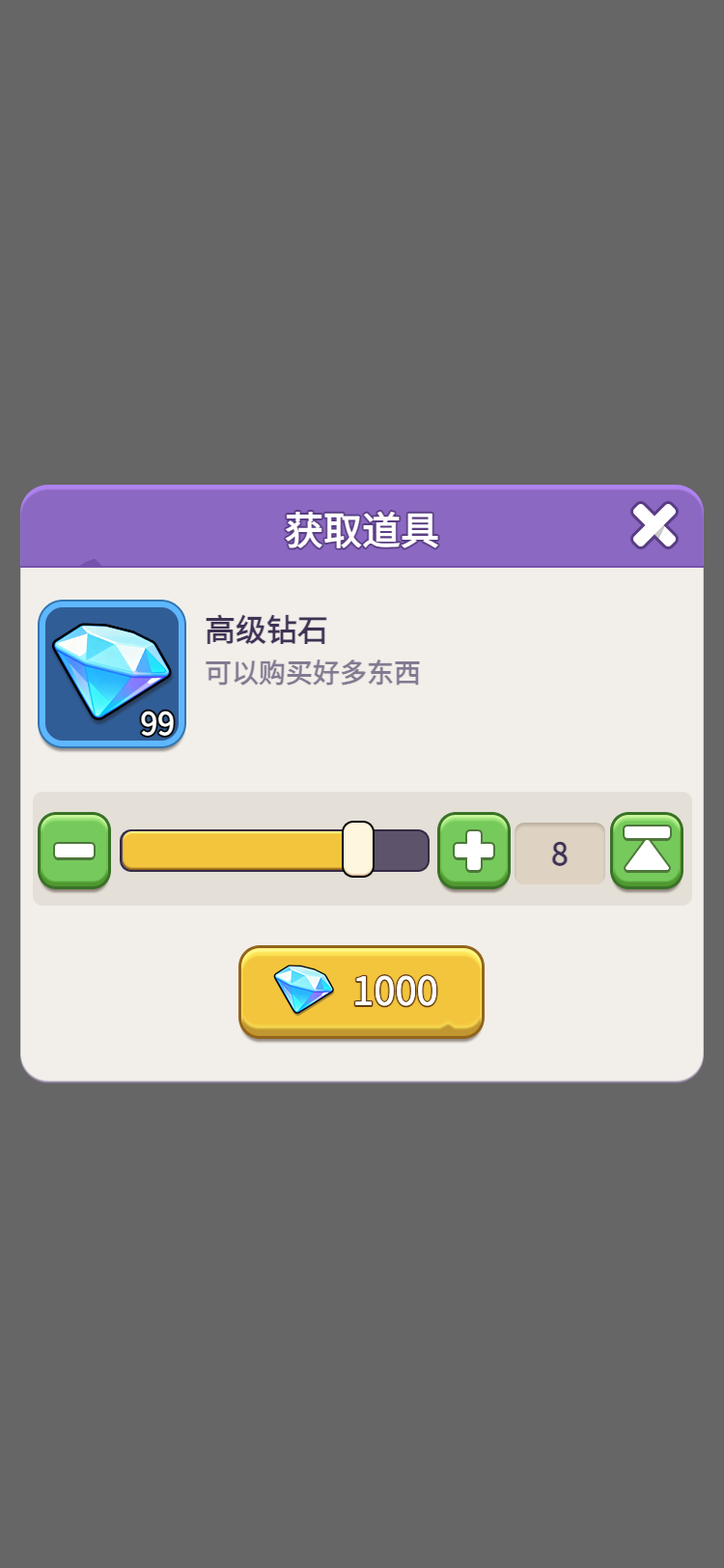
<style>
.page{position:relative;width:724px;height:1568px;background:#666666}
.page>*{position:absolute;margin:0}
.t1{font:38.6px "WebPSD-18463539-0-Regular";color:#ffffff;font-weight:bold}
.t2{font:30.9px "WebPSD-18463539-0-Regular";color:#3f3254;font-weight:bold}
.t3{font:27px "WebPSD-18463539-0-Regular";color:#837a91;font-weight:bold}
</style>
<div class="page">
<p class="t1" style="left:107px;top:502px;width:510px;height:56px">获取道具</p>
<p class="t2" style="left:205px;top:612px;width:453px;height:35px">高级钻石</p>
<p class="t3" style="left:205px;top:658px;width:453px;height:30px">可以购买好多东西</p>
</div>
